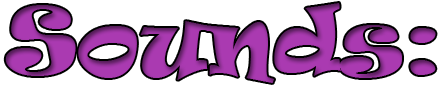
<style>
.page{position:relative;width:440px;height:86px;background:#ffffff}
.page>*{position:absolute;margin:0}
.t1{font:86.8px "Ravie";color:#aa3ab1}
</style>
<div class="page">
<p class="t1" style="left:5px;top:3px;width:431px;height:80px">Sounds:</p>
</div>
